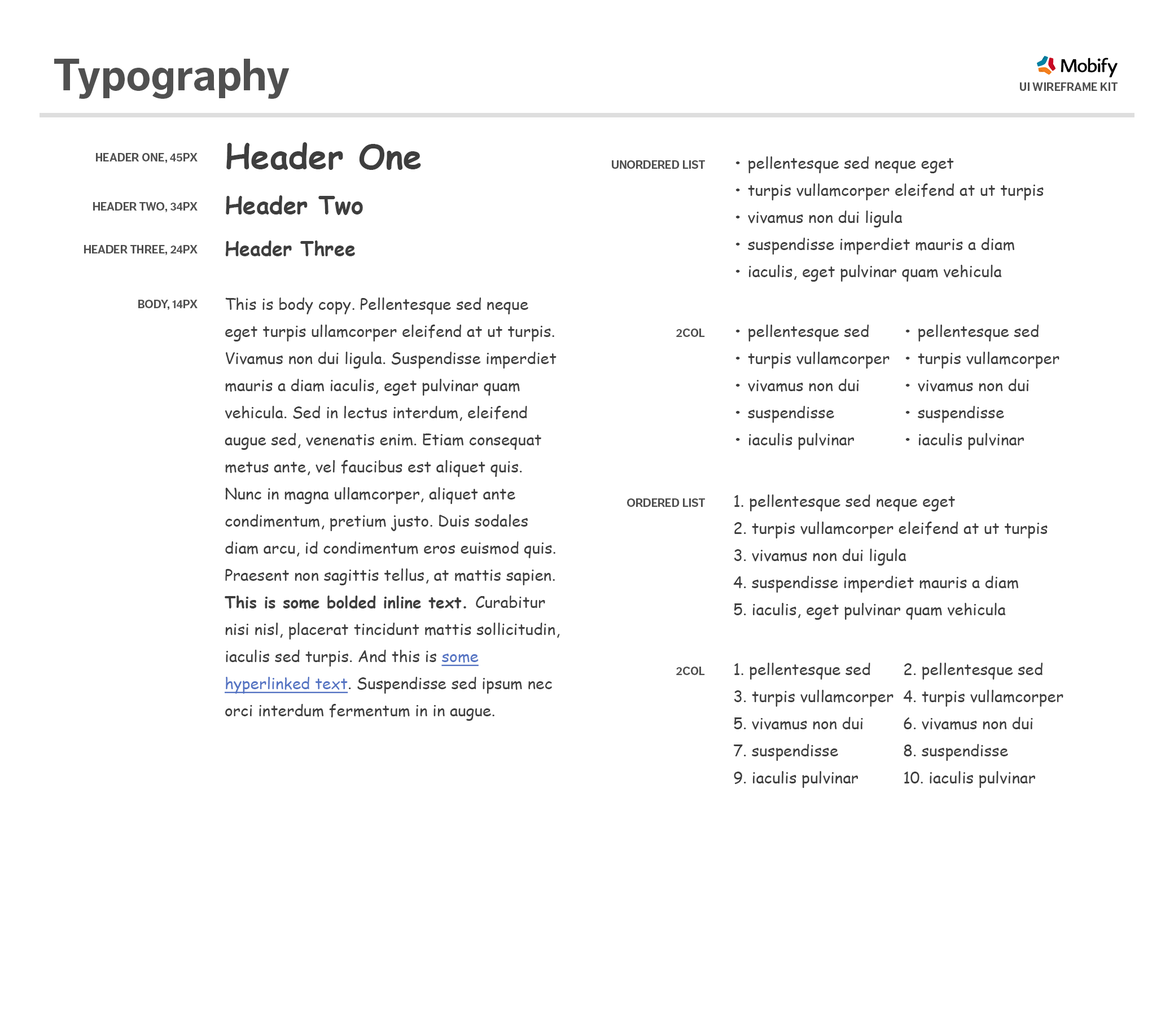
<style>
.page{position:relative;width:1174px;height:1016px;background:#ffffff}
.page>*{position:absolute;margin:0}
.t1{font:45.1px "DagnyOT-Bold";color:#505050}
.t2{font:11.3px "DagnyOT-Bold";color:#505050;text-transform:uppercase}
.t3{font:15.8px/27.1px "ComicSansMS";color:#3e3e3e}
.t4{font:33.9px/45.1px "ComicSansMS-Bold";color:#3e3e3e}
.t5{font:23.7px/45.1px "ComicSansMS-Bold";color:#3e3e3e}
.t6{font:19.2px/41.8px "ComicSansMS-Bold";color:#3e3e3e}
.t7{font:15.8px/27.1px "ComicSansMS-Bold";color:#3e3e3e}
.t8{font:15.8px/27.1px "ComicSansMS";color:#5574c3;text-decoration:underline}
</style>
<div class="page">
<p class="t1" style="left:54px;top:59px;width:236px;height:40px">Typography</p>
<p class="t2" style="left:1020px;top:82px;width:97px;height:9px">UI Wireframe Kit</p>
<p class="t3" style="left:225px;top:142px;width:335px;height:579px"><span class="t4">Header One<br></span><span class="t5">Header Two<br></span><span class="t6">Header Three<br></span><br>This is body copy. Pellentesque sed neque eget turpis ullamcorper eleifend at ut turpis. Vivamus non dui ligula. Suspendisse imperdiet mauris a diam iaculis, eget pulvinar quam vehicula. Sed in lectus interdum, eleifend augue sed, venenatis enim. Etiam consequat metus ante, vel faucibus est aliquet quis. Nunc in magna ullamcorper, aliquet ante condimentum, pretium justo. Duis sodales diam arcu, id condimentum eros euismod quis. Praesent non sagittis tellus, at mattis sapien. <span class="t7">This is some bolded inline text. </span>Curabitur nisi nisl, placerat tincidunt mattis sollicitudin, iaculis sed turpis. And this is <span class="t8">some hyperlinked text</span>. Suspendisse sed ipsum nec orci interdum fermentum in in augue.</p>
<p class="t2" style="left:96px;top:153px;width:102px;height:10px">Header One, 45px</p>
<p class="t2" style="left:612px;top:160px;width:93px;height:9px">Unordered List</p>
<p class="t3" style="left:735px;top:156px;width:308px;height:126px"><span class="t7">•</span> pellentesque sed neque eget<br><span class="t7">•</span> turpis vullamcorper eleifend at ut turpis<br><span class="t7">•</span> vivamus non dui ligula<br><span class="t7">•</span> suspendisse imperdiet mauris a diam<br><span class="t7">•</span> iaculis, eget pulvinar quam vehicula</p>
<p class="t2" style="left:93px;top:202px;width:105px;height:10px">Header Two, 34px</p>
<p class="t2" style="left:84px;top:245px;width:114px;height:10px">Header Three, 24px</p>
<p class="t2" style="left:138px;top:300px;width:60px;height:10px">Body, 14px</p>
<p class="t2" style="left:676px;top:328px;width:29px;height:9px">2COL</p>
<p class="t3" style="left:735px;top:325px;width:154px;height:125px"><span class="t7">•</span> pellentesque sed <br><span class="t7">•</span> turpis vullamcorper<br><span class="t7">•</span> vivamus non dui<br><span class="t7">•</span> suspendisse<br><span class="t7">•</span> iaculis pulvinar</p>
<p class="t3" style="left:905px;top:325px;width:154px;height:125px"><span class="t7">•</span> pellentesque sed <br><span class="t7">•</span> turpis vullamcorper<br><span class="t7">•</span> vivamus non dui<br><span class="t7">•</span> suspendisse<br><span class="t7">•</span> iaculis pulvinar</p>
<p class="t3" style="left:733px;top:494px;width:314px;height:126px">1. pellentesque sed neque eget<br>2. turpis vullamcorper eleifend at ut turpis<br>3. vivamus non dui ligula<br>4. suspendisse imperdiet mauris a diam<br>5. iaculis, eget pulvinar quam vehicula</p>
<p class="t2" style="left:627px;top:498px;width:78px;height:9px">ordered List</p>
<p class="t3" style="left:733px;top:663px;width:160px;height:125px">1. pellentesque sed <br>3. turpis vullamcorper<br>5. vivamus non dui<br>7. suspendisse<br>9. iaculis pulvinar</p>
<p class="t3" style="left:903px;top:663px;width:160px;height:125px">2. pellentesque sed <br>4. turpis vullamcorper<br>6. vivamus non dui<br>8. suspendisse<br>10. iaculis pulvinar</p>
<p class="t2" style="left:676px;top:666px;width:29px;height:9px">2COL</p>
</div>
